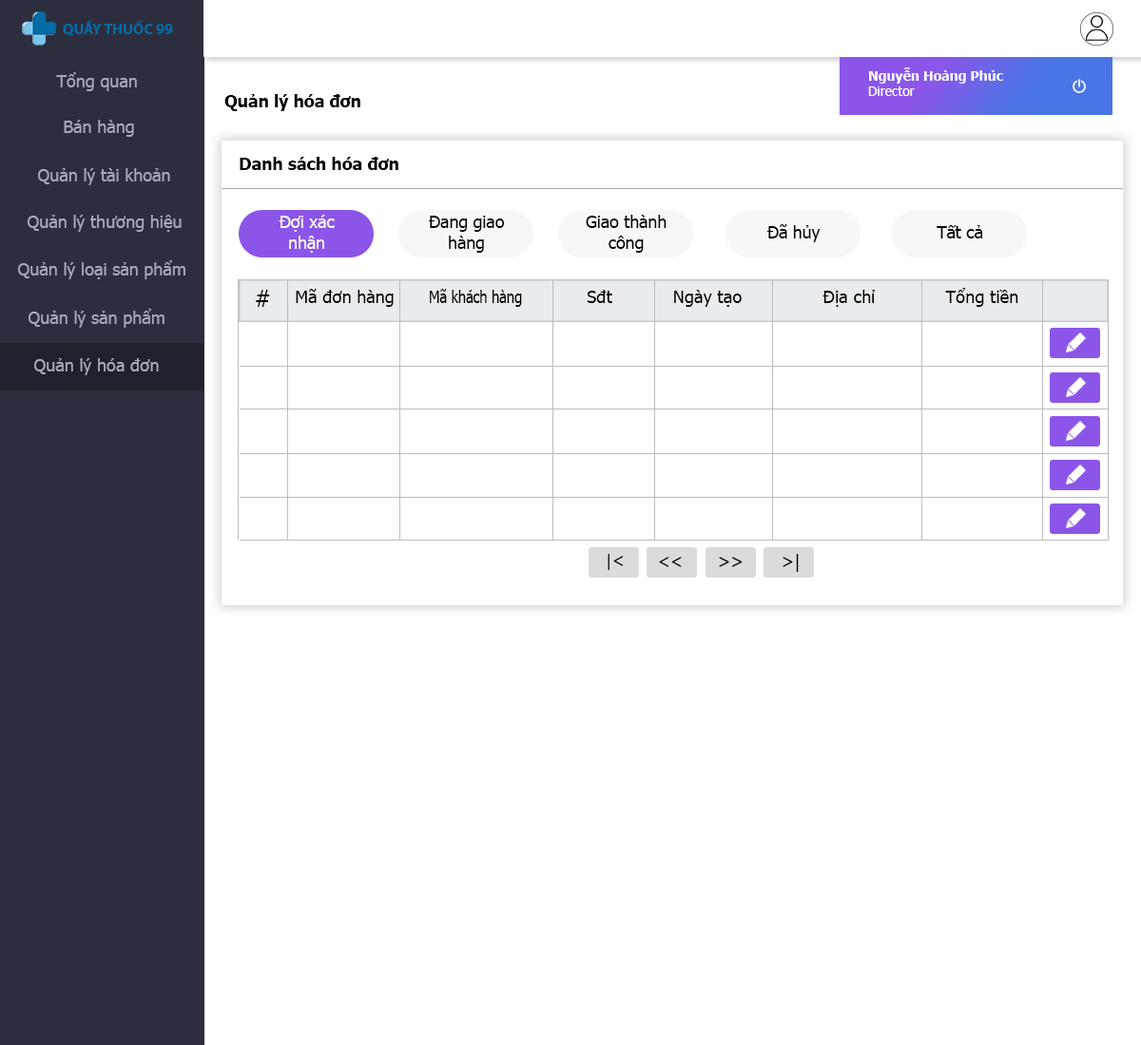
<style>
.page{position:relative;width:1141px;height:1045px;background:#ffffff}
.page>*{position:absolute;margin:0}
.t1{font:15.2px "MyriadPro-Bold";color:#036aa4}
.t2{font:17.1px "Tahoma";color:#a6a9b7}
.t3{font:13.3px "Tahoma-Bold";color:#ffffff}
.t4{font:13.3px "Tahoma";color:#ffffff}
.t5{font:17.1px "Tahoma-Bold";color:#010101}
.t6{font:16.8px "Tahoma-Bold";color:#000000}
.t7{font:16.8px "Tahoma";color:#ffffff}
.t8{font:16.8px "Tahoma";color:#000000}
.t9{font:22.8px "Tahoma";color:#000000}
.t10{font:17.1px "Tahoma";color:#000000}
.t11{font:17.1px "Tahoma";color:#000000;scale:0.81 1}
.t12{font:17px "Tahoma";color:#000000}
.t13{font:17.5px "Tahoma";color:#000000}
.t14{font:17.8px "Tahoma";color:#000000}
.t15{font:17.8px "Tahoma";color:#000000;scale:0.96 1}
</style>
<div class="page">
<p class="t1" style="left:63px;top:20px;width:110px;height:16px">QUẦY THUỐC 99</p>
<p class="t2" style="left:56px;top:72px;width:81px;height:19px">Tổng quan</p>
<p class="t3" style="left:868px;top:67px;width:135px;height:29px">Nguyễn Hoàng Phúc<br><span class="t4">Director</span></p>
<p class="t5" style="left:224px;top:94px;width:136px;height:17px">Quản lý hóa đơn</p>
<p class="t2" style="left:64px;top:120px;width:70px;height:17px">Bán hàng</p>
<p class="t6" style="left:240px;top:157px;width:158px;height:13px">Danh sách hóa đơn</p>
<p class="t2" style="left:38px;top:168px;width:132px;height:17px">Quản lý tài khoản</p>
<p class="t2" style="left:28px;top:215px;width:154px;height:17px">Quản lý thương hiệu</p>
<p class="t7" style="left:278px;top:215px;width:57px;height:38px;text-align:center">Đợi xác nhận</p>
<p class="t8" style="left:428px;top:216px;width:77px;height:37px;text-align:center">Đang giao hàng</p>
<p class="t8" style="left:585px;top:215px;width:81px;height:38px;text-align:center">Giao thành công</p>
<p class="t8" style="left:766px;top:224px;width:54px;height:18px">Đã hủy</p>
<p class="t8" style="left:936px;top:225px;width:47px;height:14px">Tất cả</p>
<p class="t2" style="left:18px;top:260px;width:167px;height:19px">Quản lý loại sản phẩm</p>
<p class="t9" style="left:256px;top:290px;width:14px;height:17px">#</p>
<p class="t10" style="left:296px;top:289px;width:97px;height:18px">Mã đơn hàng</p>
<p class="t11" style="left:430px;top:289px;width:92px;height:18px">Mã khách hàng</p>
<p class="t10" style="left:586px;top:290px;width:26px;height:13px">Sđt</p>
<p class="t10" style="left:674px;top:290px;width:67px;height:17px">Ngày tạo</p>
<p class="t12" style="left:822px;top:290px;width:53px;height:17px">Địa chỉ</p>
<p class="t12" style="left:945px;top:288px;width:73px;height:19px">Tổng tiền</p>
<p class="t2" style="left:29px;top:309px;width:135px;height:19px">Quản lý sản phẩm</p>
<p class="t2" style="left:34px;top:358px;width:125px;height:17px">Quản lý hóa đơn</p>
<p class="t13" style="left:607px;top:554px;width:16px;height:16px">|&lt;</p>
<p class="t13" style="left:659px;top:557px;width:22px;height:10px">&lt;&lt;</p>
<p class="t14" style="left:719px;top:557px;width:23px;height:10px;rotate:180deg">&lt;&lt;</p>
<p class="t15" style="left:782px;top:554px;width:16px;height:18px;rotate:180deg">|&lt;</p>
</div>
